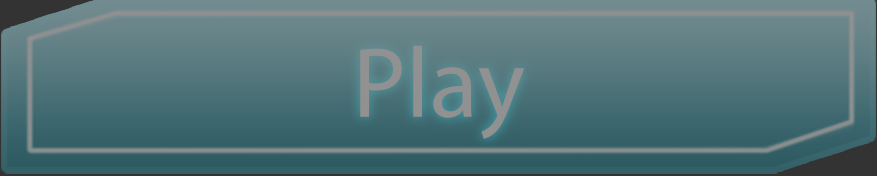
<style>
.page{position:relative;width:877px;height:176px}
.page>*{position:absolute;margin:0}
.t1{font:100px "MyriadPro-Regular";color:#919191}
</style>
<div class="page">
<p class="t1" style="left:360px;top:45px;width:165px;height:94px">Play</p>
</div>
